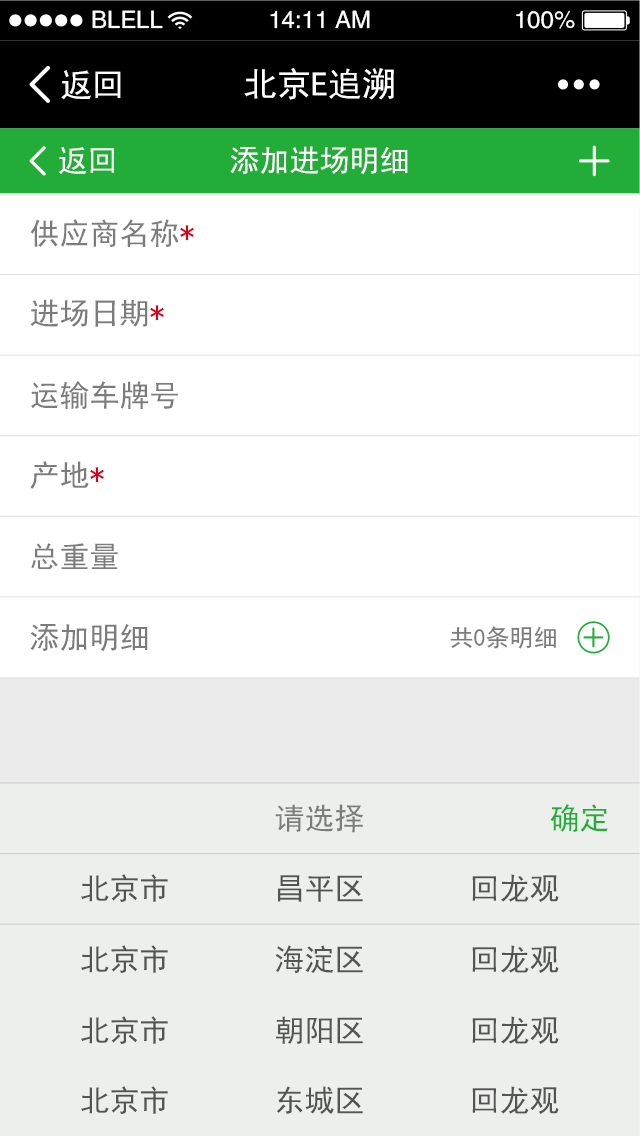
<style>
.page{position:relative;width:640px;height:1136px;background:#ffffff}
.page>*{position:absolute;margin:0}
.t1{font:24px "FZHTJW--GB1-0";color:#ffffff}
.t2{font:32px "SimHei";color:#ffffff}
.t3{font:34px "SimHei";color:#ffffff}
.t4{font:30px "SimHei";color:#ffffff}
.t5{font:30px "SimHei";color:#7c7c7c}
.t6{font:30px "SimHei";color:#d8001a}
.t7{font:24px "SimHei";color:#7c7c7c}
.t8{font:30px "SimHei";color:#22ac38}
.t9{font:30px "SimHei";color:#545454}
</style>
<div class="page">
<p class="t1" style="left:92px;top:10px;width:71px;height:19px">BLELL</p>
<p class="t1" style="left:270px;top:10px;width:100px;height:19px">14:11 AM</p>
<p class="t1" style="left:516px;top:10px;width:59px;height:19px">100%</p>
<p class="t2" style="left:61px;top:70px;width:60px;height:30px">返回</p>
<p class="t3" style="left:244px;top:68px;width:150px;height:32px">北京E追溯</p>
<p class="t4" style="left:59px;top:147px;width:55px;height:27px">返回</p>
<p class="t4" style="left:230px;top:146px;width:178px;height:29px">添加进场明细</p>
<p class="t5" style="left:30px;top:219px;width:164px;height:29px">供应商名称<span class="t6">*</span></p>
<p class="t5" style="left:30px;top:299px;width:134px;height:28px">进场日期<span class="t6">*</span></p>
<p class="t5" style="left:31px;top:381px;width:147px;height:29px">运输车牌号</p>
<p class="t5" style="left:30px;top:461px;width:74px;height:28px">产地<span class="t6">*</span></p>
<p class="t5" style="left:31px;top:543px;width:87px;height:27px">总重量</p>
<p class="t5" style="left:30px;top:624px;width:118px;height:28px">添加明细</p>
<p class="t7" style="left:450px;top:626px;width:106px;height:23px">共0条明细</p>
<p class="t5" style="left:275px;top:804px;width:89px;height:29px">请选择</p>
<p class="t8" style="left:550px;top:804px;width:58px;height:29px">确定</p>
<p class="t9" style="left:81px;top:874px;width:87px;height:28px">北京市</p>
<p class="t9" style="left:278px;top:875px;width:85px;height:27px">昌平区</p>
<p class="t9" style="left:472px;top:874px;width:87px;height:28px">回龙观</p>
<p class="t9" style="left:81px;top:945px;width:87px;height:28px">北京市</p>
<p class="t9" style="left:275px;top:945px;width:88px;height:29px">海淀区</p>
<p class="t9" style="left:472px;top:945px;width:87px;height:28px">回龙观</p>
<p class="t9" style="left:81px;top:1016px;width:87px;height:28px">北京市</p>
<p class="t9" style="left:276px;top:1016px;width:87px;height:28px">朝阳区</p>
<p class="t9" style="left:472px;top:1016px;width:87px;height:28px">回龙观</p>
<p class="t9" style="left:81px;top:1086px;width:87px;height:28px">北京市</p>
<p class="t9" style="left:277px;top:1086px;width:86px;height:28px">东城区</p>
<p class="t9" style="left:472px;top:1086px;width:87px;height:28px">回龙观</p>
</div>
